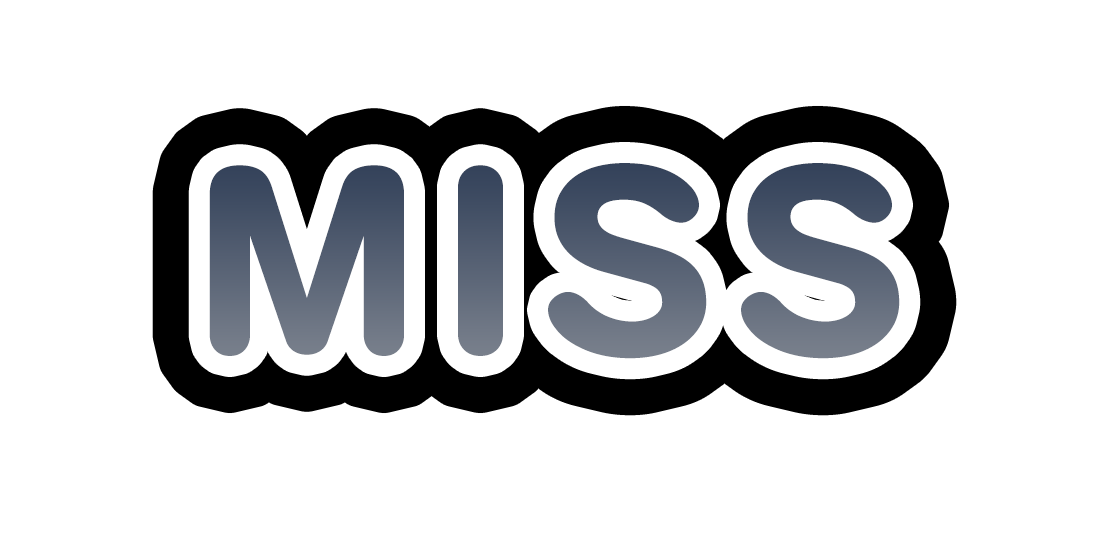
<style>
.page{position:relative;width:1107px;height:558px;background:#ffffff}
.page>*{position:absolute;margin:0}
.t1{font:249.2px "TmoneyRoundWind-ExtraBold";letter-spacing:0.025em;font-weight:bold}
</style>
<div class="page">
<p class="t1" style="left:209px;top:163px;width:691px;height:196px">MISS</p>
</div>
